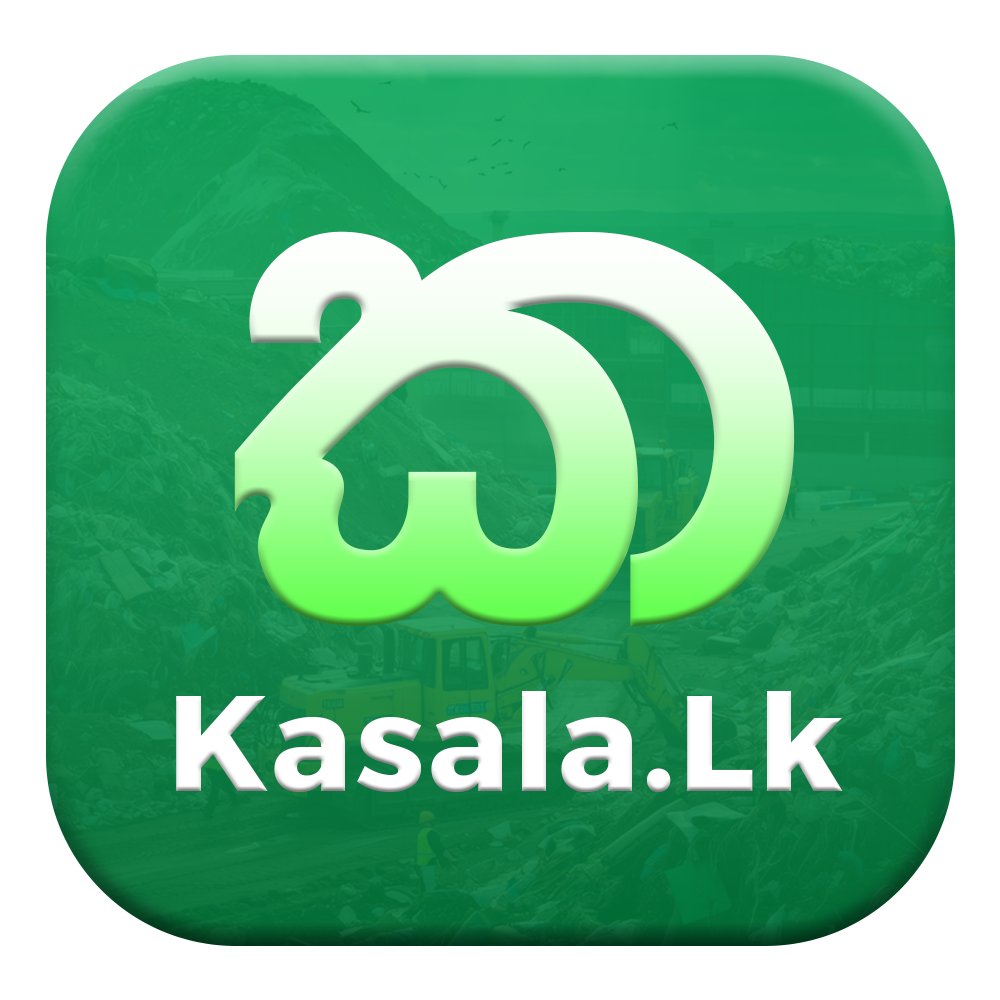
<style>
.page{position:relative;width:1000px;height:1000px;background:#ffffff}
.page>*{position:absolute;margin:0}
.t1{font:768.1px "4u-Ganganee";letter-spacing:0.02em}
.t2{font:135.4px "Montserrat-Bold";letter-spacing:0.02em;color:#ffffff}
</style>
<div class="page">
<p class="t1" style="left:234px;top:231px;width:561px;height:396px">l</p>
<p class="t2" style="left:176px;top:691px;width:667px;height:102px">Kasala.Lk</p>
</div>
